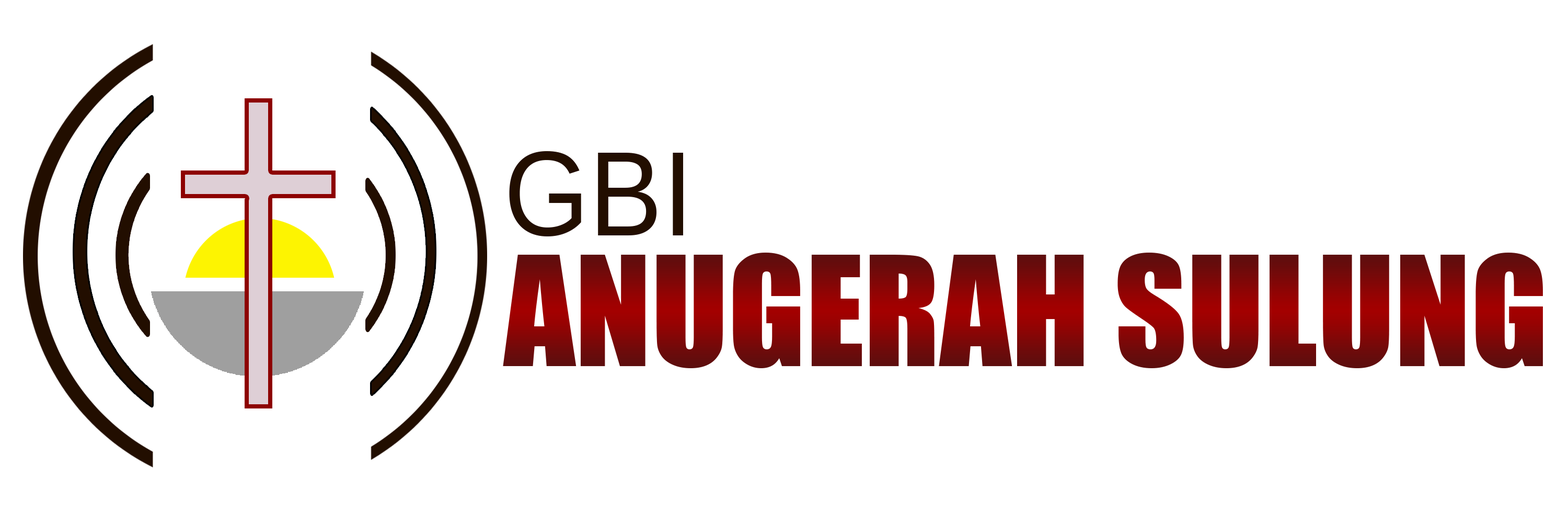
<style>
.page{position:relative;width:1568px;height:523px;background:#ffffff}
.page>*{position:absolute;margin:0}
.t1{font:120.3px "Arimo";color:#220e00;scale:0.91 1}
.t2{font:140.7px "Impact"}
</style>
<div class="page">
<p class="t1" style="left:509px;top:151px;width:174px;height:85px">GBI</p>
<p class="t2" style="left:503px;top:252px;width:1040px;height:116px">ANUGERAH SULUNG</p>
</div>
